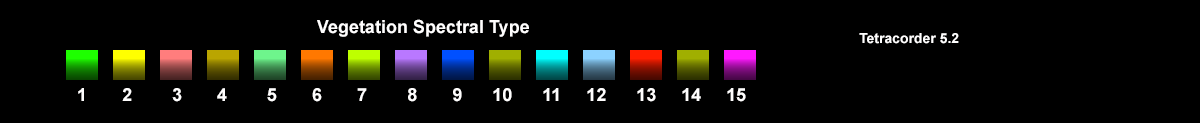
<style>
.page{position:relative;width:1200px;height:123px;background:#000000}
.page>*{position:absolute;margin:0}
.t1{font:18px "Arial-BoldMT";color:#fffefe}
.t2{font:14px "Arial-BoldMT";color:#fffefe}
</style>
<div class="page">
<p class="t1" style="left:317px;top:19px;width:212px;height:18px">Vegetation Spectral Type</p>
<p class="t2" style="left:859px;top:33px;width:100px;height:11px">Tetracorder 5.2</p>
<p class="t1" style="left:78px;top:88px;width:668px;height:14px">1       2        3       4        5       6       7        8       9      10      11     12      13     14     15</p>
</div>
